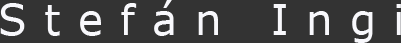
<style>
.page{position:relative;width:401px;height:43px;background:#333333}
.page>*{position:absolute;margin:0}
.t1{font:41.7px "Verdana";letter-spacing:0.42em;color:#f8f8fc}
</style>
<div class="page">
<p class="t1" style="left:0px;top:0px;width:401px;height:43px">Stefán Ingi</p>
</div>
